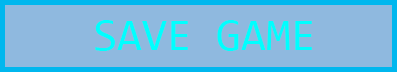
<style>
.page{position:relative;width:397px;height:72px;background:#8fb9df}
.page>*{position:absolute;margin:0}
.t1{font:45px "Consolas";color:#00ffff}
</style>
<div class="page">
<p class="t1" style="left:95px;top:20px;width:217px;height:31px">SAVE GAME</p>
</div>
